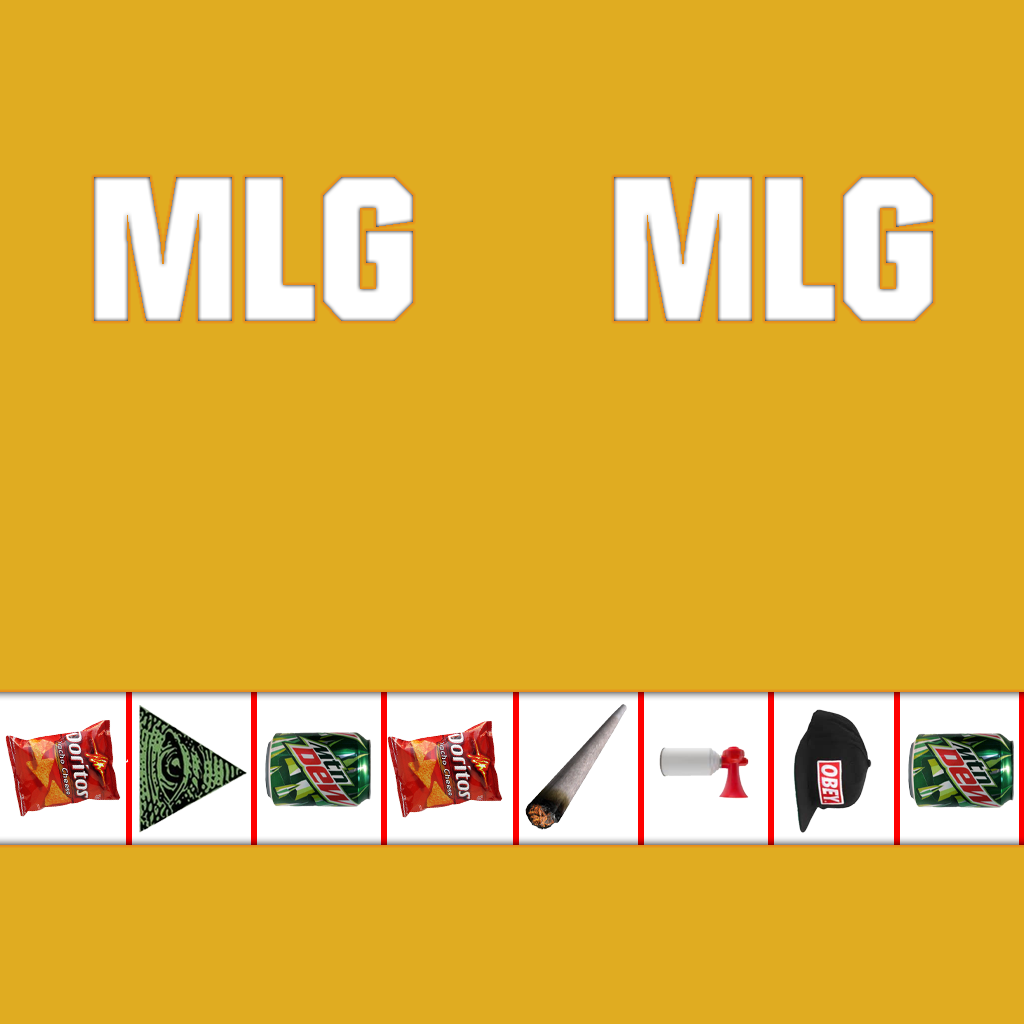
<style>
.page{position:relative;width:1024px;height:1024px;background:#e0ac21}
.page>*{position:absolute;margin:0}
.t1{font:200px "Autumn";letter-spacing:0.005em;color:#ffffff}
</style>
<div class="page">
<p class="t1" style="left:94px;top:177px;width:319px;height:144px">MLG</p>
<p class="t1" style="left:614px;top:177px;width:319px;height:144px">MLG</p>
</div>
